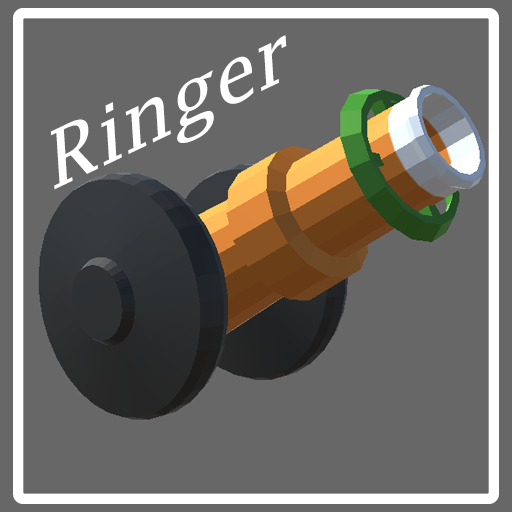
<style>
.page{position:relative;width:512px;height:512px;background:#676767}
.page>*{position:absolute;margin:0}
.t1{font:80px "LucidaFax";color:#ffffff}
</style>
<div class="page">
<p class="t1" style="left:50px;top:35px;width:237px;height:155px;rotate:-25deg">Ringer</p>
</div>
